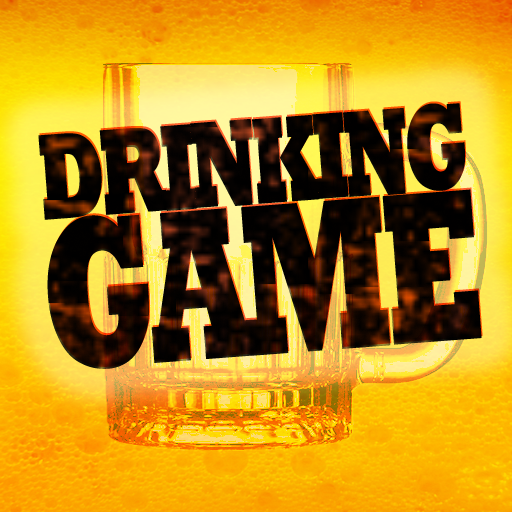
<style>
.page{position:relative;width:512px;height:512px}
.page>*{position:absolute;margin:0}
.t1{font:124.5px/150.9px "Rockwell-ExtraBold";letter-spacing:-0.06em;color:#000000;scale:0.62 1}
.t2{font:218.8px/150.9px "Rockwell-ExtraBold";letter-spacing:-0.06em;color:#000000;scale:0.62 1}
</style>
<div class="page">
<p class="t1" style="left:39px;top:101px;width:444px;height:266px;text-align:center;rotate:-4deg;opacity:0.6">DRINKING<br><span class="t2">GAME</span></p>
</div>
